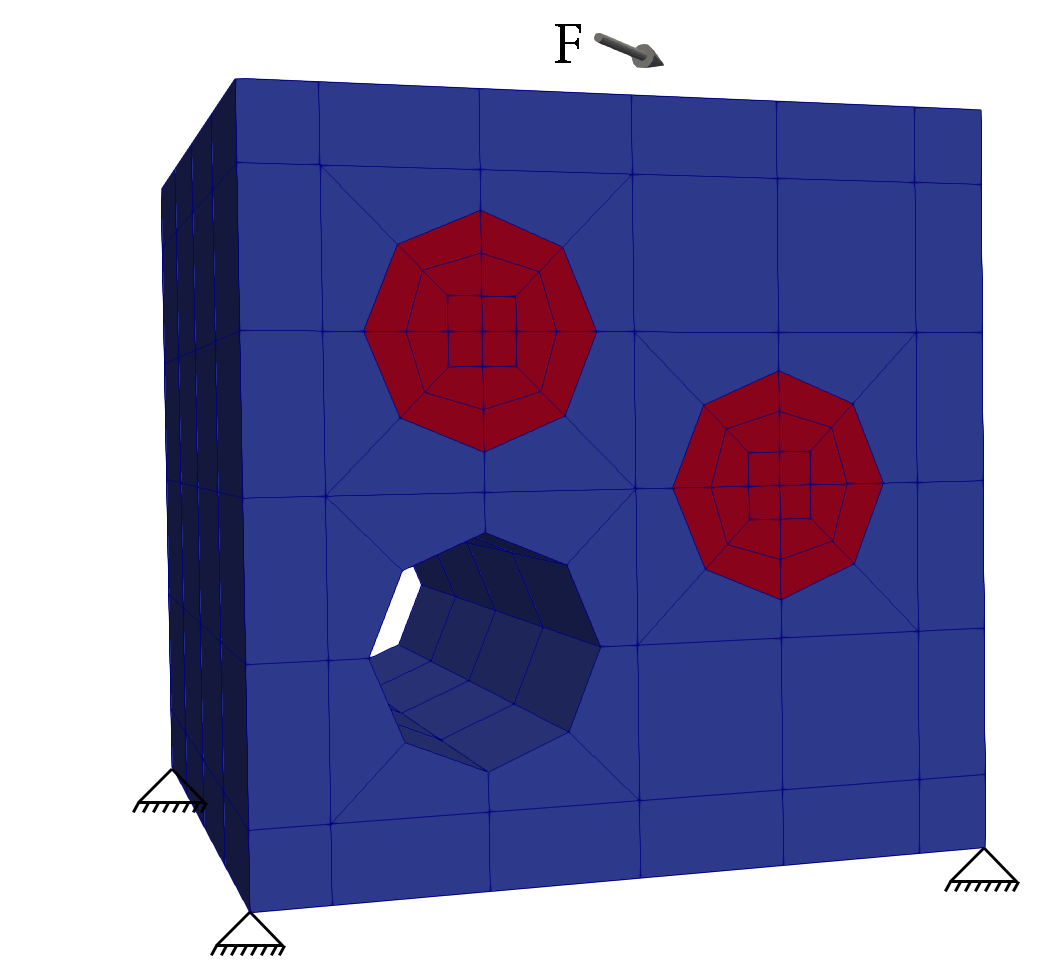
<style>
.page{position:relative;width:1050px;height:960px;background:#2d398b}
.page>*{position:absolute;margin:0}
.t1{font:60px "MinionPro-Regular";color:#000000}
</style>
<div class="page">
<p class="t1" style="left:555px;top:24px;width:26px;height:39px">F</p>
</div>
